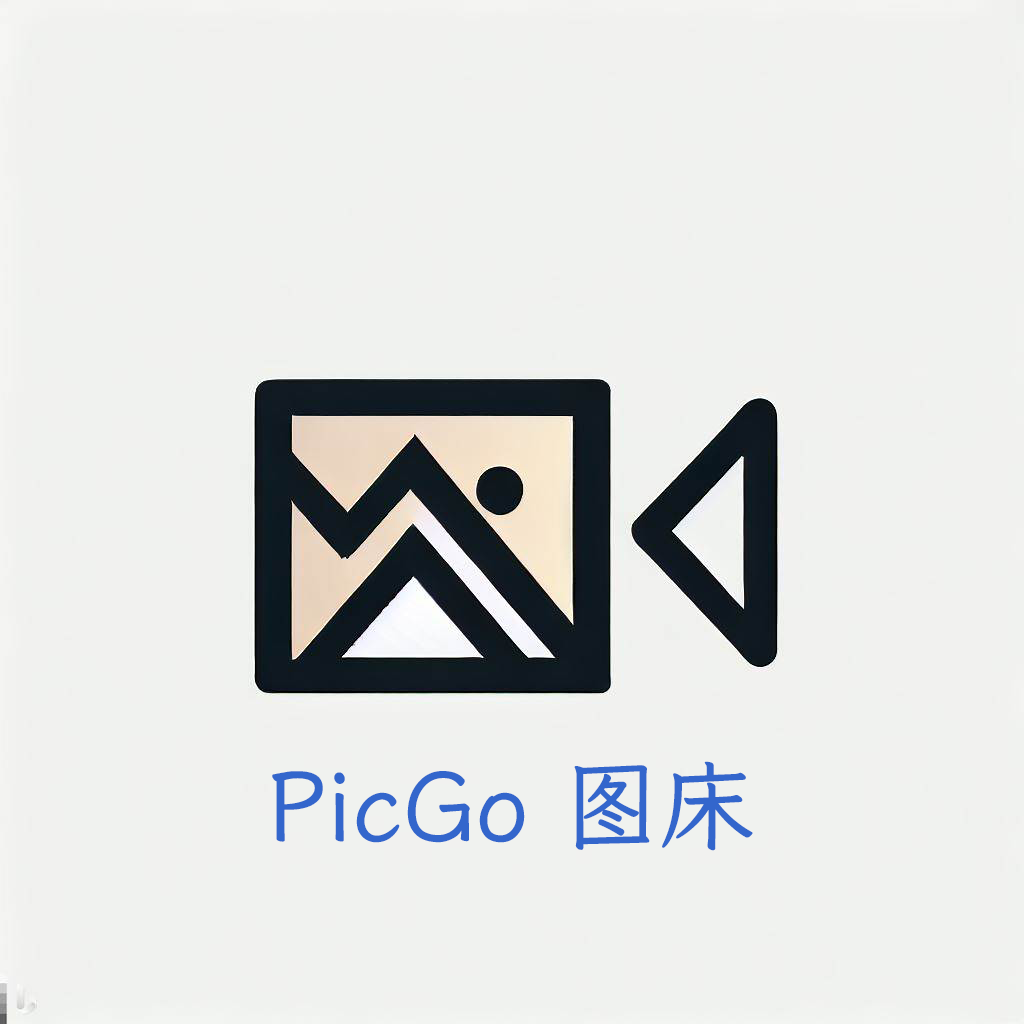
<style>
.page{position:relative;width:1024px;height:1024px;background:#f0f2ef}
.page>*{position:absolute;margin:0}
.t1{font:96px "LXGWWenKai-Bold";color:#3366cc}
</style>
<div class="page">
<p class="t1" style="left:272px;top:761px;width:481px;height:90px">PicGo 图床</p>
</div>
